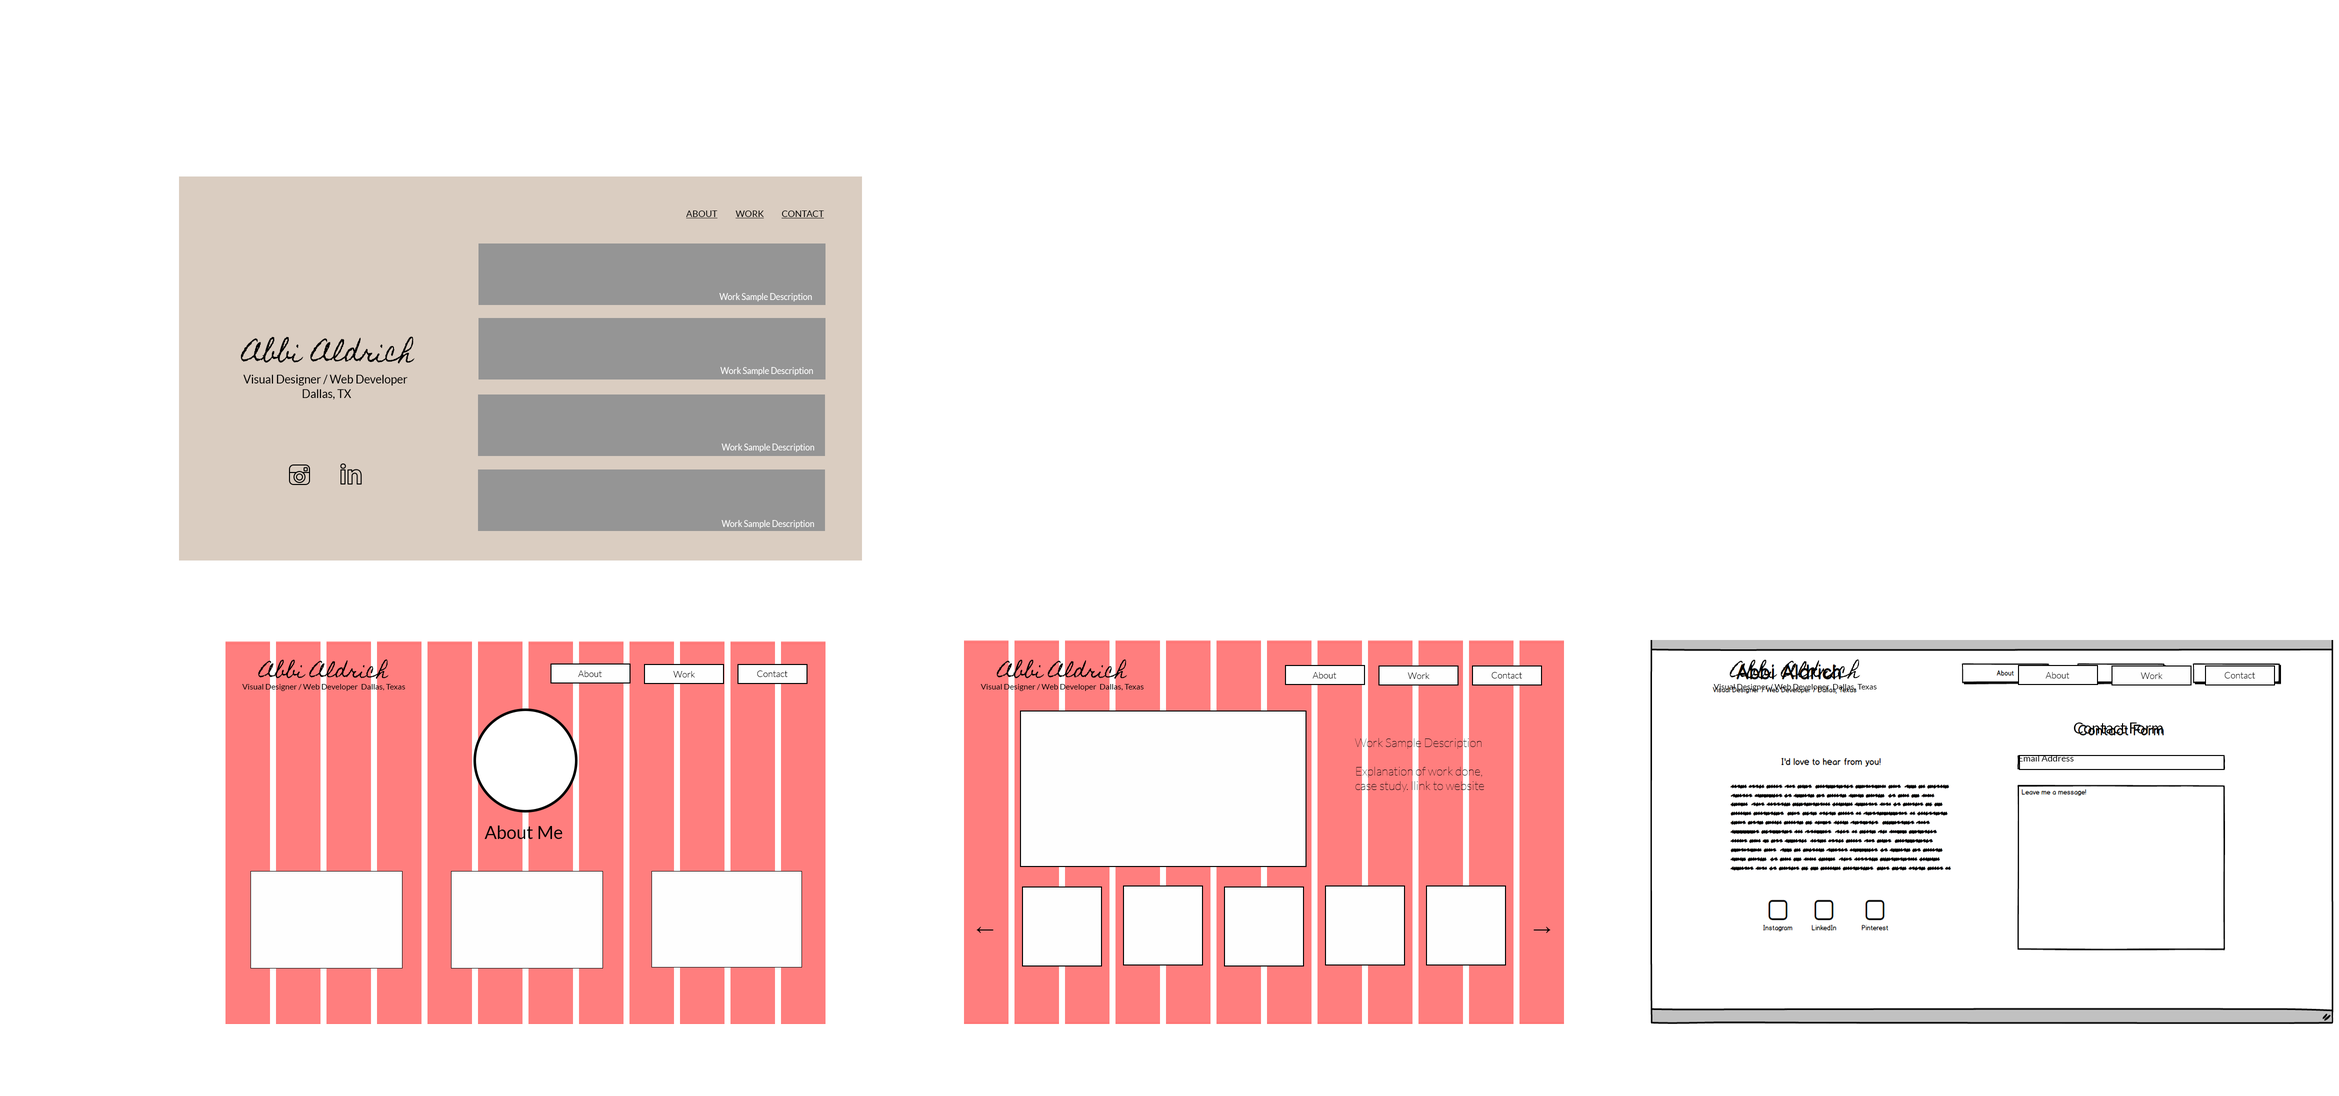
<style>
.page{position:relative;width:2339px;height:1096px;background:#ffffff}
.page>*{position:absolute;margin:0}
.t1{font:9px "Lato-Regular";color:#050505;text-transform:uppercase;text-decoration:underline}
.t2{font:9px "Lato-Regular";color:#000000;text-transform:uppercase;text-decoration:underline}
.t3{font:9px "Lato-Regular";color:#ffffff;scale:0.92 1}
.t4{font:25px "HomemadeApple";color:#000000;scale:0.95 1}
.t5{font:12px "Lato-Regular";color:#000000;scale:0.95 1}
.t6{font:18px "HomemadeApple";color:#000000}
.t7{font:9px "Lato-Light";color:#050505}
.t8{font:9px "Lato-Light";color:#000000}
.t9{font:8px "Lato-Regular";color:#000000}
.t10{font:15px "Lato-Regular";color:#000000}
.t11{font:12px "Lato-Hairline";color:#050505}
.t12{font:9px "Lato-Regular";color:#000000}
.t13{font:18px "Lato-Regular";color:#000000}
.t14{font:18px "ArialMT";color:#000000}
</style>
<div class="page">
<p class="t1" style="left:686px;top:210px;width:32px;height:8px">About</p>
<p class="t2" style="left:736px;top:210px;width:28px;height:8px">Work</p>
<p class="t2" style="left:782px;top:210px;width:42px;height:8px">Contact</p>
<p class="t3" style="left:719px;top:293px;width:93px;height:9px">Work Sample Description</p>
<p class="t4" style="left:240px;top:336px;width:64px;height:27px">Abbi</p>
<p class="t4" style="left:310px;top:336px;width:105px;height:28px">Aldrich</p>
<p class="t5" style="left:243px;top:374px;width:165px;height:26px;text-align:center">Visual Designer / Web Developer <br>Dallas, TX</p>
<p class="t3" style="left:720px;top:367px;width:93px;height:9px">Work Sample Description</p>
<p class="t3" style="left:722px;top:444px;width:92px;height:8px">Work Sample Description</p>
<p class="t3" style="left:722px;top:520px;width:92px;height:8px">Work Sample Description</p>
<p class="t6" style="left:258px;top:659px;width:131px;height:20px">Abbi Aldrich</p>
<p class="t6" style="left:996px;top:659px;width:132px;height:20px">Abbi Aldrich</p>
<p class="t6" style="left:1730px;top:659px;width:130px;height:20px">Abbi Aldrich</p>
<p class="t7" style="left:578px;top:670px;width:24px;height:7px">About</p>
<p class="t8" style="left:673px;top:671px;width:22px;height:7px">Work</p>
<p class="t8" style="left:757px;top:670px;width:31px;height:7px">Contact</p>
<p class="t7" style="left:1312px;top:672px;width:24px;height:6px">About</p>
<p class="t8" style="left:1408px;top:672px;width:22px;height:7px">Work</p>
<p class="t8" style="left:1492px;top:672px;width:30px;height:6px">Contact</p>
<p class="t7" style="left:2046px;top:672px;width:24px;height:6px">About</p>
<p class="t8" style="left:2140px;top:672px;width:22px;height:7px">Work</p>
<p class="t8" style="left:2224px;top:672px;width:31px;height:6px">Contact</p>
<p class="t9" style="left:242px;top:684px;width:164px;height:7px">Visual Designer / Web Developer  Dallas, Texas</p>
<p class="t9" style="left:980px;top:684px;width:164px;height:7px">Visual Designer / Web Developer  Dallas, Texas</p>
<p class="t9" style="left:1714px;top:684px;width:163px;height:7px">Visual Designer / Web Developer  Dallas, Texas</p>
<p class="t10" style="left:2074px;top:722px;width:89px;height:12px">Contact Form</p>
<p class="t11" style="left:1355px;top:738px;width:129px;height:54px">Work Sample Description <br><br>Explanation of work done,<br>case study. llink to website</p>
<p class="t12" style="left:2018px;top:755px;width:56px;height:7px">Email Address</p>
<p class="t13" style="left:484px;top:826px;width:78px;height:13px">About Me</p>
<p class="t14" style="left:976px;top:926px;width:18px;height:7px">←</p>
<p class="t14" style="left:1534px;top:926px;width:16px;height:7px">→</p>
</div>
